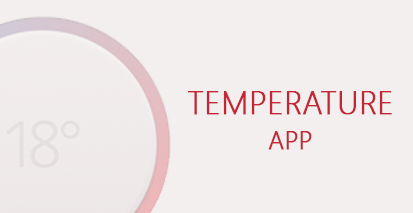
<style>
.page{position:relative;width:413px;height:213px;background:#f3efee}
.page>*{position:absolute;margin:0}
.t1{font:32px "SegoeUI-Light";color:#c32637;font-weight:bold}
.t2{font:25px "SegoeUI-Light";color:#c32637;font-weight:bold}
</style>
<div class="page">
<p class="t1" style="left:188px;top:91px;width:204px;height:24px">TEMPERATURE</p>
<p class="t2" style="left:268px;top:131px;width:44px;height:19px">APP</p>
</div>
